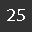
<style>
.page{position:relative;width:32px;height:32px;background:#333333}
.page>*{position:absolute;margin:0}
.t1{font:17.8px "MyriadPro-Regular";color:#ffffff;scale:1.12 1}
</style>
<div class="page">
<p class="t1" style="left:7px;top:9px;width:18px;height:12px">25</p>
</div>
